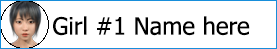
<style>
.page{position:relative;width:277px;height:49px;background:#ffffff}
.page>*{position:absolute;margin:0}
.t1{font:24px "Tahoma";color:#000000}
</style>
<div class="page">
<p class="t1" style="left:53px;top:16px;width:197px;height:20px">Girl #1 Name here</p>
</div>
